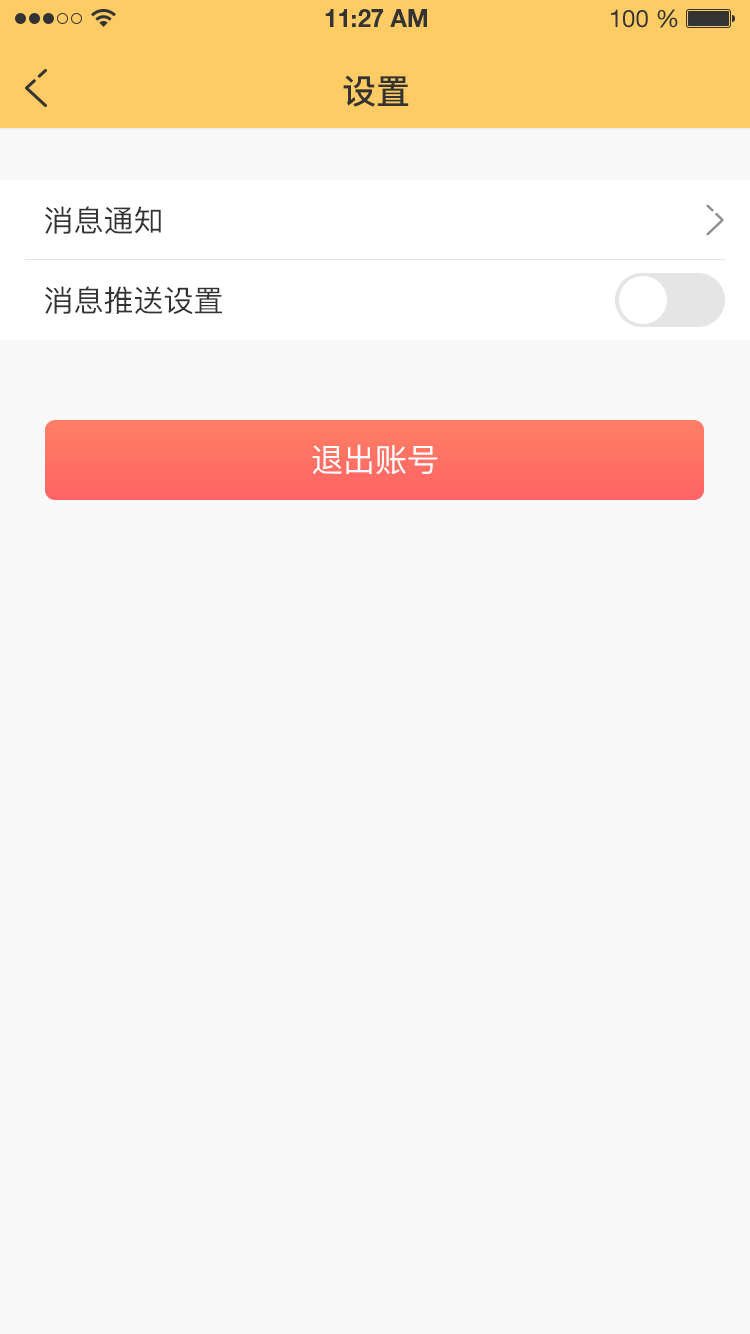
<style>
.page{position:relative;width:750px;height:1334px;background:#f9f9f9}
.page>*{position:absolute;margin:0}
.t1{font:34px "PingFang-SC-Bold";color:#333333;text-transform:uppercase}
.t2{font:30px "PingFang-SC-Medium";color:#333333;text-transform:uppercase}
.t3{font:32px "PingFang-SC-Medium";color:#ffffff;text-transform:uppercase}
</style>
<div class="page">
<p class="t1" style="left:343px;top:75px;width:66px;height:32px">设置</p>
<p class="t2" style="left:45px;top:206px;width:116px;height:28px">消息通知</p>
<p class="t2" style="left:45px;top:286px;width:177px;height:28px">消息推送设置</p>
<p class="t3" style="left:312px;top:444px;width:126px;height:31px">退出账号</p>
</div>
